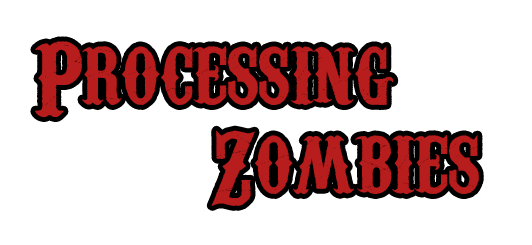
<style>
.page{position:relative;width:532px;height:245px;background:#ffffff}
.page>*{position:absolute;margin:0}
.t1{font:100px "CarnivaleeFreakshow";letter-spacing:0.005em;color:#b71d1d}
</style>
<div class="page">
<p class="t1" style="left:35px;top:41px;width:359px;height:76px">Processing</p>
<p class="t1" style="left:211px;top:130px;width:268px;height:76px">Zombies</p>
</div>
